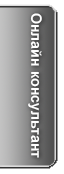
<style>
.page{position:relative;width:64px;height:174px}
.page>*{position:absolute;margin:0}
.t1{font:14.3px "Arial-BoldMT";color:#ffffff}
</style>
<div class="page">
<p class="t1" style="left:28px;top:13px;width:14px;height:145px;rotate:90deg">Онлайн консультант</p>
</div>
